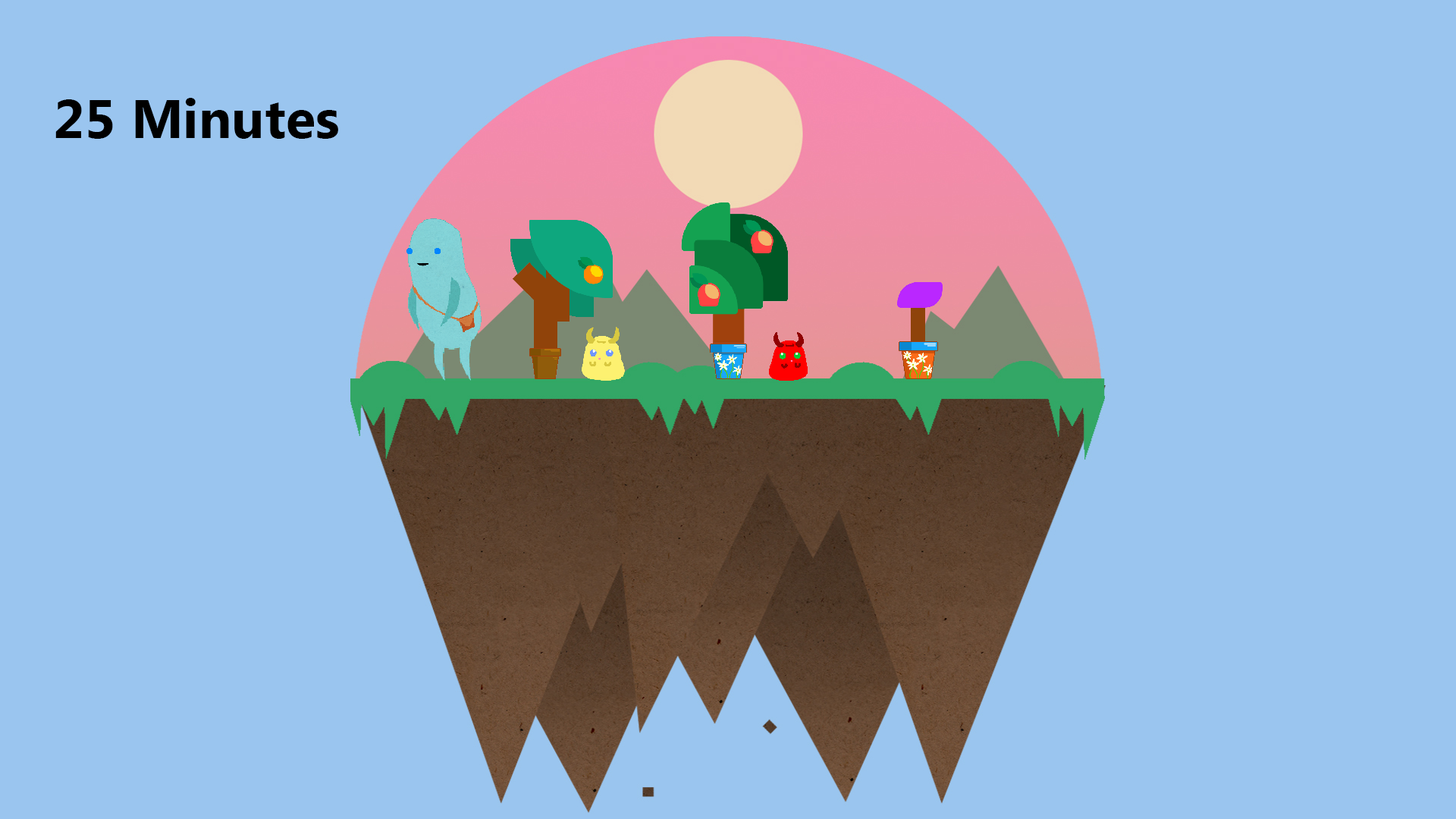
<style>
.page{position:relative;width:1456px;height:819px;background:#9ac5ef}
.page>*{position:absolute;margin:0}
.t1{font:54.6px "MyanmarText-Bold";color:#000000}
</style>
<div class="page">
<p class="t1" style="left:55px;top:98px;width:283px;height:41px">25 Minutes</p>
</div>
